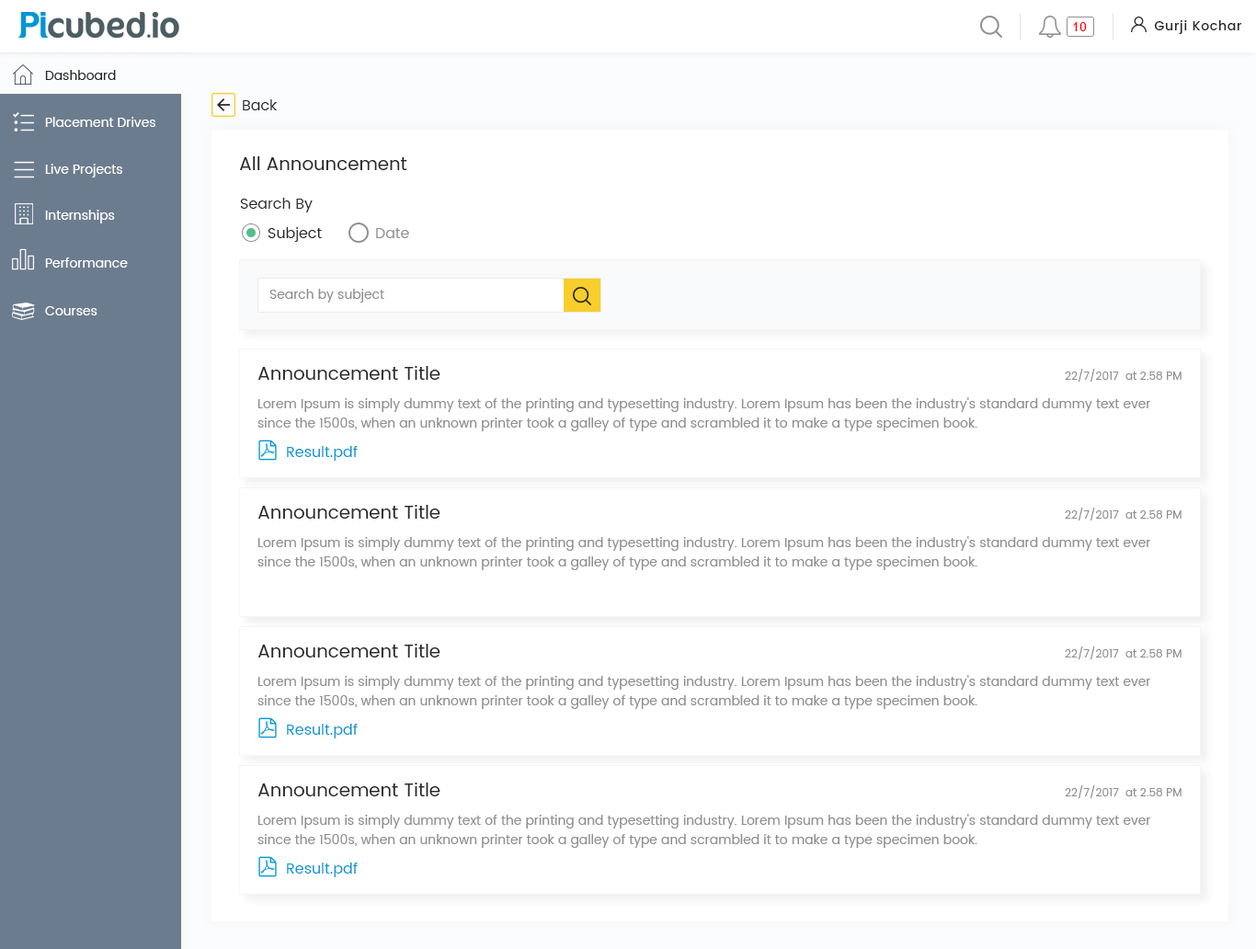
<style>
.page{position:relative;width:1256px;height:949px;background:#ffffff}
.page>*{position:absolute;margin:0}
.t1{font:14.7px "Poppins-Regular";color:#282828}
.t2{font:18.4px "Poppins-Regular";color:#282828}
.t3{font:14.7px "Poppins-Regular";color:#909090}
.t4{font:12.9px "Poppins-Regular";color:#909090}
.t5{font:11px "Poppins-Regular";color:#909090}
.t6{font:12.9px/19.3px "Poppins-Regular";color:#909090}
.t7{font:14.7px "Poppins-Regular";color:#0196d4}
</style>
<div class="page">
<p class="t1" style="left:243px;top:99px;width:35px;height:11px">Back</p>
<p class="t2" style="left:239px;top:156px;width:168px;height:14px">All Announcement</p>
<p class="t1" style="left:240px;top:198px;width:73px;height:14px">Search By</p>
<p class="t1" style="left:268px;top:227px;width:54px;height:15px">Subject</p>
<p class="t3" style="left:376px;top:228px;width:33px;height:10px">Date</p>
<p class="t4" style="left:269px;top:289px;width:115px;height:14px">Search by subject</p>
<p class="t2" style="left:258px;top:366px;width:183px;height:14px">Announcement Title</p>
<p class="t5" style="left:1065px;top:369px;width:117px;height:13px">22/7/2017  at 2.58 PM</p>
<p class="t6" style="left:258px;top:397px;width:893px;height:34px">Lorem Ipsum is simply dummy text of the printing and typesetting industry. Lorem Ipsum has been the industry's standard dummy text ever <br>since the 1500s, when an unknown printer took a galley of type and scrambled it to make a type specimen book.</p>
<p class="t7" style="left:287px;top:446px;width:71px;height:15px">Result.pdf</p>
<p class="t2" style="left:258px;top:505px;width:183px;height:14px">Announcement Title</p>
<p class="t5" style="left:1065px;top:508px;width:117px;height:13px">22/7/2017  at 2.58 PM</p>
<p class="t6" style="left:258px;top:536px;width:893px;height:34px">Lorem Ipsum is simply dummy text of the printing and typesetting industry. Lorem Ipsum has been the industry's standard dummy text ever <br>since the 1500s, when an unknown printer took a galley of type and scrambled it to make a type specimen book.</p>
<p class="t2" style="left:258px;top:644px;width:183px;height:14px">Announcement Title</p>
<p class="t5" style="left:1065px;top:647px;width:117px;height:12px">22/7/2017  at 2.58 PM</p>
<p class="t6" style="left:258px;top:675px;width:893px;height:34px">Lorem Ipsum is simply dummy text of the printing and typesetting industry. Lorem Ipsum has been the industry's standard dummy text ever <br>since the 1500s, when an unknown printer took a galley of type and scrambled it to make a type specimen book.</p>
<p class="t7" style="left:287px;top:724px;width:71px;height:15px">Result.pdf</p>
<p class="t2" style="left:258px;top:783px;width:183px;height:13px">Announcement Title</p>
<p class="t5" style="left:1065px;top:785px;width:117px;height:13px">22/7/2017  at 2.58 PM</p>
<p class="t6" style="left:258px;top:814px;width:893px;height:34px">Lorem Ipsum is simply dummy text of the printing and typesetting industry. Lorem Ipsum has been the industry's standard dummy text ever <br>since the 1500s, when an unknown printer took a galley of type and scrambled it to make a type specimen book.</p>
<p class="t7" style="left:287px;top:863px;width:71px;height:14px">Result.pdf</p>
</div>
